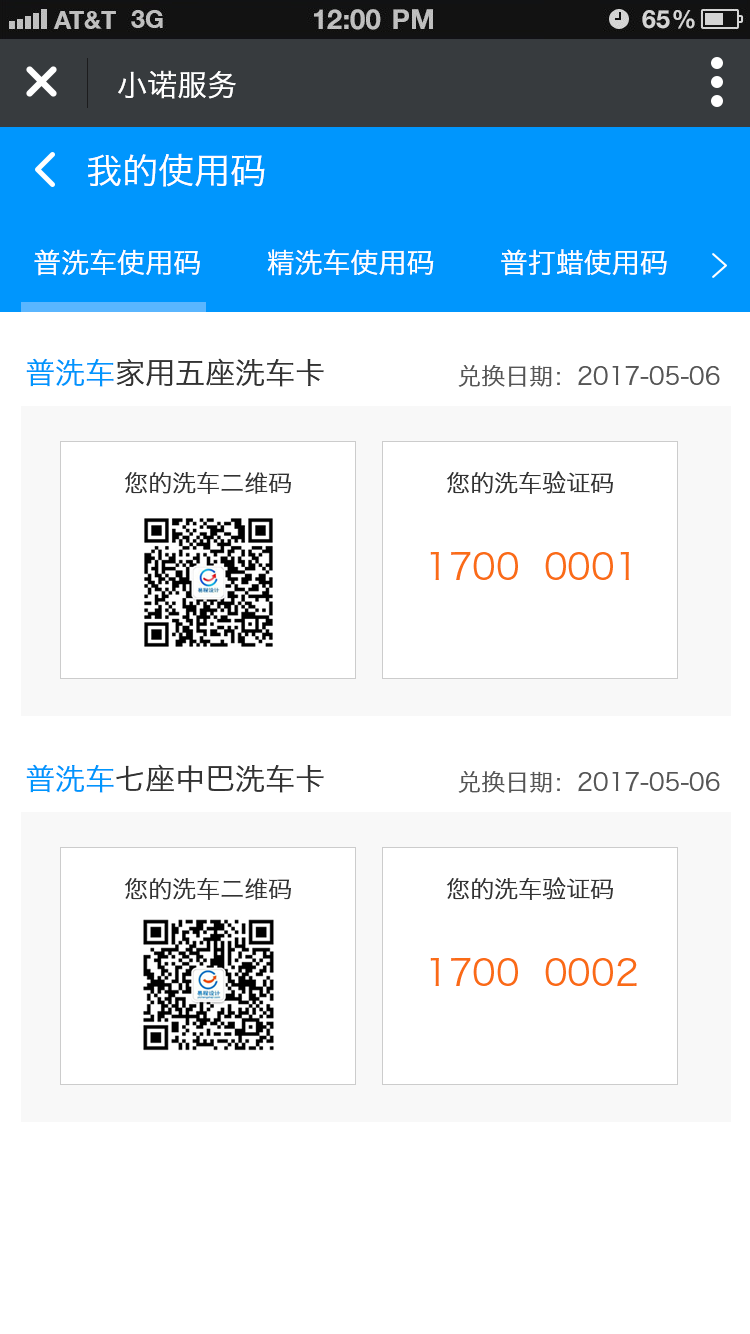
<style>
.page{position:relative;width:750px;height:1334px;background:#ffffff}
.page>*{position:absolute;margin:0}
.t1{font:30px "HiraginoSansGB-W3";color:#ffffff}
.t2{font:36px "HiraginoSansGB-W3";color:#ffffff}
.t3{font:28px "HiraginoSansGB-W3";color:#ffffff}
.t4{font:30px "HiraginoSansGB-W3";color:#333333}
.t5{font:30px "HiraginoSansGB-W3";color:#0096fd}
.t6{font:24px "HiraginoSansGB-W3";color:#565656}
.t7{font:24px "HiraginoSansGB-W3";color:#333333}
.t8{font:36px "HiraginoSansGB-W3";color:#fa6b15}
</style>
<div class="page">
<p class="t1" style="left:118px;top:70px;width:118px;height:29px">小诺服务</p>
<p class="t2" style="left:88px;top:153px;width:177px;height:34px">我的使用码</p>
<p class="t3" style="left:34px;top:249px;width:633px;height:27px">普洗车使用码       精洗车使用码       普打蜡使用码</p>
<p class="t4" style="left:26px;top:358px;width:298px;height:29px"><span class="t5">普洗车</span>家用五座洗车卡</p>
<p class="t6" style="left:458px;top:365px;width:262px;height:22px">兑换日期：2017-05-06</p>
<p class="t7" style="left:124px;top:471px;width:167px;height:23px">您的洗车二维码</p>
<p class="t7" style="left:446px;top:471px;width:167px;height:23px">您的洗车验证码</p>
<p class="t8" style="left:430px;top:551px;width:199px;height:29px">1700  0001</p>
<p class="t4" style="left:26px;top:764px;width:298px;height:29px"><span class="t5">普洗车</span>七座中巴洗车卡</p>
<p class="t6" style="left:458px;top:771px;width:262px;height:22px">兑换日期：2017-05-06</p>
<p class="t7" style="left:124px;top:877px;width:167px;height:23px">您的洗车二维码</p>
<p class="t7" style="left:446px;top:877px;width:167px;height:23px">您的洗车验证码</p>
<p class="t8" style="left:430px;top:957px;width:207px;height:30px">1700  0002</p>
</div>
